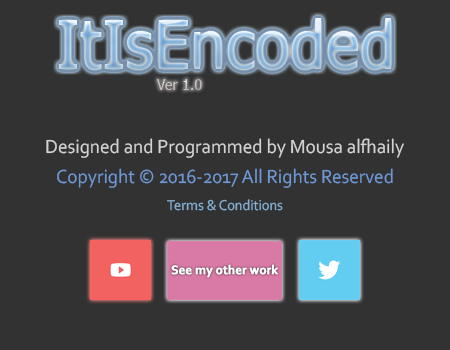
<style>
.page{position:relative;width:450px;height:350px;background:#323232}
.page>*{position:absolute;margin:0}
.t1{font:67px "Tahoma";scale:0.96 1}
.t2{font:15px "Tahoma";color:#cbc0c0;scale:0.96 1}
.t3{font:20px "Corbel";color:#d3d3d3;scale:0.96 1}
.t4{font:20px "Corbel";color:#6f98d4;scale:0.96 1}
.t5{font:15px "Corbel";color:#85afd1;scale:0.96 1}
.t6{font:13px "Corbel-Bold";color:#ffffff;font-weight:bold;scale:0.96 1}
</style>
<div class="page">
<p class="t1" style="left:58px;top:18px;width:334px;height:52px">ItIsEncoded</p>
<p class="t2" style="left:157px;top:79px;width:45px;height:11px">Ver 1.0</p>
<p class="t3" style="left:46px;top:138px;width:358px;height:20px">Designed and Programmed by Mousa alfhaily</p>
<p class="t4" style="left:57px;top:168px;width:336px;height:20px">Copyright © 2016-2017 All Rights Reserved</p>
<p class="t5" style="left:167px;top:199px;width:116px;height:12px">Terms &amp; Conditions</p>
<p class="t6" style="left:171px;top:264px;width:107px;height:14px">See my other work</p>
</div>
